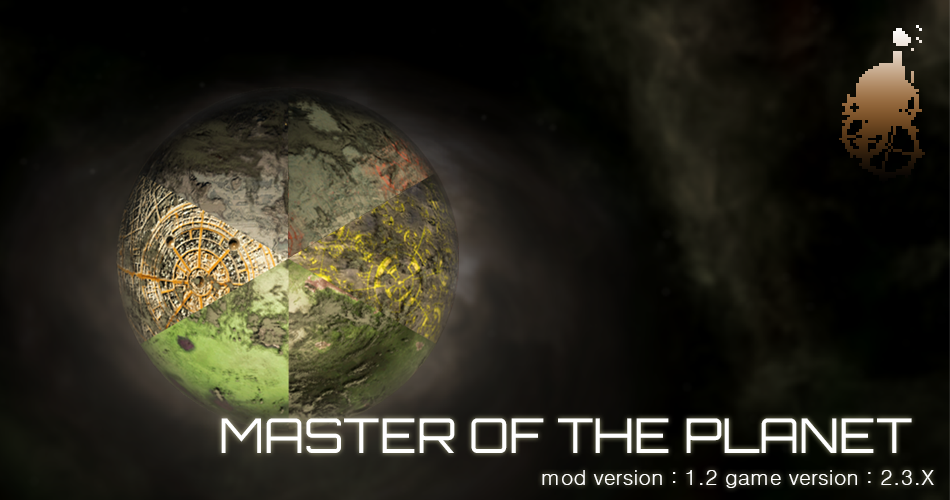
<style>
.page{position:relative;width:950px;height:500px}
.page>*{position:absolute;margin:0}
.t1{font:48px "Orbitron-Regular";color:#ffffff}
.t2{font:21.4px "Dotum";color:#ffffff}
</style>
<div class="page">
<p class="t1" style="left:221px;top:418px;width:691px;height:35px">MASTER OF THE PLANET</p>
<p class="t2" style="left:542px;top:470px;width:392px;height:18px">mod version : 1.2 game version : 2.3.X</p>
</div>
